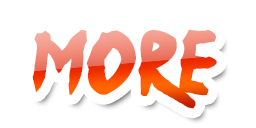
<style>
.page{position:relative;width:256px;height:128px;background:#ffffff}
.page>*{position:absolute;margin:0}
.t1{font:72px "Ninja-Naruto"}
</style>
<div class="page">
<p class="t1" style="left:32px;top:29px;width:185px;height:80px">more</p>
</div>
